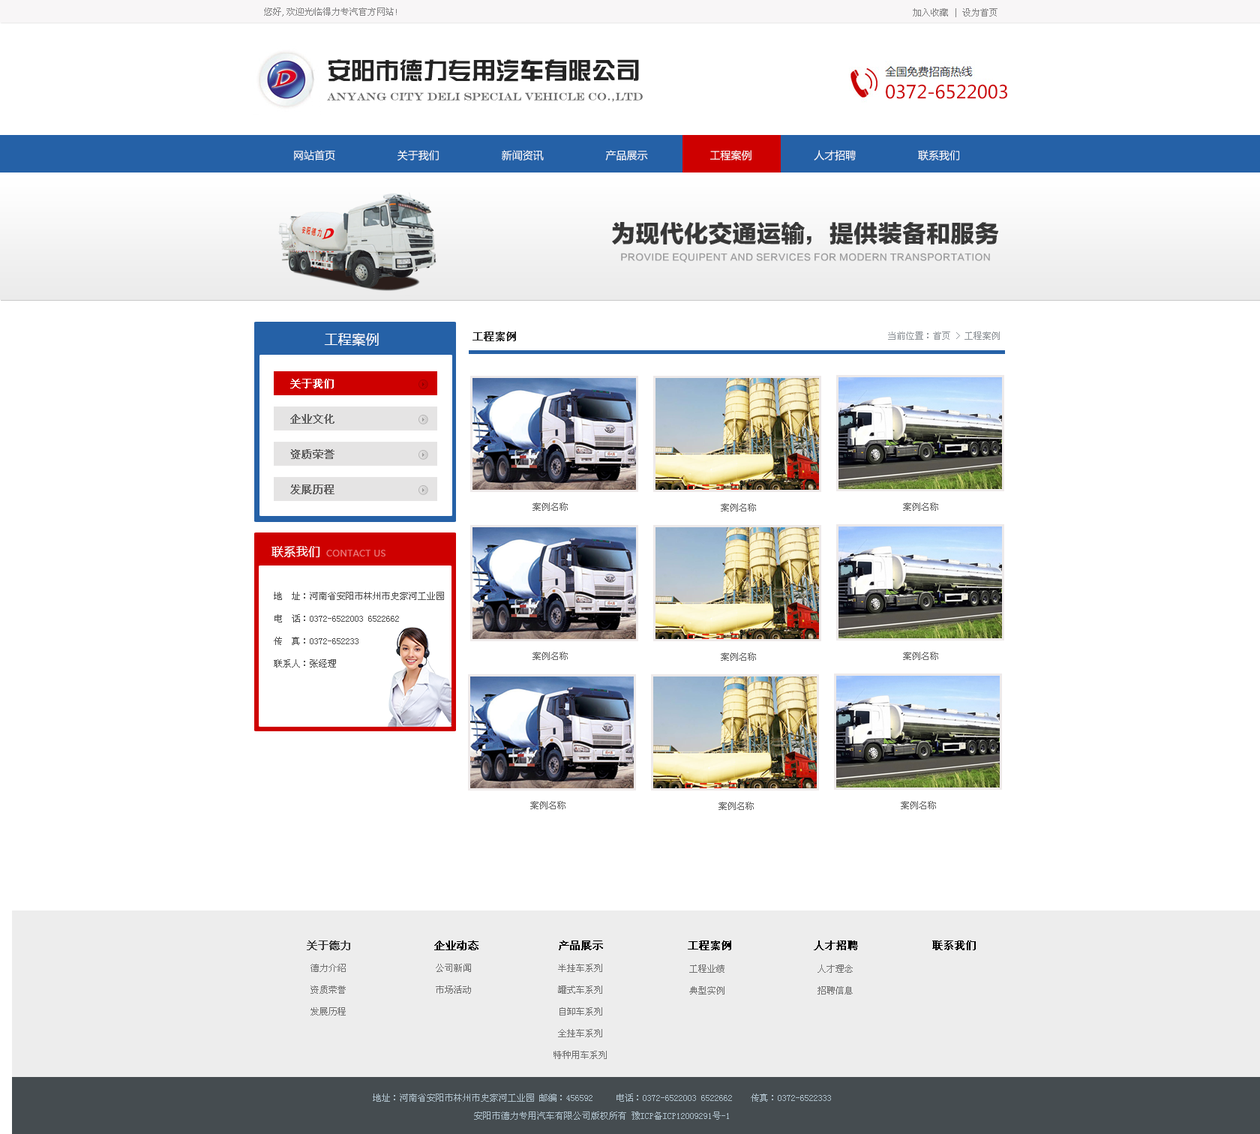
<style>
.page{position:relative;width:1260px;height:1134px;background:#ffffff}
.page>*{position:absolute;margin:0}
.t1{font:9px "SimSun";color:#848384}
.t2{font:24px "FZZYJW--GB1-0";color:#242424}
.t3{font:18px "MicrosoftYaHei";color:#cc0407}
.t4{font:10.5px "EngraversMT";color:#6d6d6d}
.t5{font:10.5px "MicrosoftYaHei";color:#ffffff}
.t6{font:24px "FZLTTHJW--GB1-0";color:#383838}
.t7{font:9px "FZLTZHK--GBK1-0";letter-spacing:0.02em;color:#9e9e9f}
.t8{font:13.5px "MicrosoftYaHei";letter-spacing:0.02em;color:#ffffff}
.t9{font:10.5px "SimSun";color:#2a2a2a;font-weight:bold}
.t10{font:9px "SimSun";color:#90959a}
.t11{font:10.5px "SimSun";letter-spacing:0.02em;color:#ffffff;font-weight:bold}
.t12{font:10.5px "SimSun";letter-spacing:0.02em;color:#636262;font-weight:bold}
.t13{font:9px "SimSun";color:#676767}
.t14{font:12px "MicrosoftYaHei";letter-spacing:0.02em;color:#fefefe}
.t15{font:9px "MicrosoftYaHei";letter-spacing:0.02em;color:#e97575}
.t16{font:9px/22.5px "SimSun";color:#505050}
.t17{font:10.5px "SimSun";color:#3a3a3a;font-weight:bold}
.t18{font:10.5px "SimSun";color:#000000;font-weight:bold}
.t19{font:9px/21.8px "SimSun";color:#727272}
.t20{font:9px/18px "SimSun";color:#adbfca}
</style>
<div class="page">
<p class="t1" style="left:264px;top:8px;width:133px;height:8px">您好,欢迎光临得力专汽官方网站!</p>
<p class="t1" style="left:913px;top:8px;width:85px;height:9px">加入收藏 | 设为首页</p>
<p class="t2" style="left:328px;top:59px;width:311px;height:23px">安阳市德力专用汽车有限公司</p>
<p class="t3" style="left:886px;top:84px;width:121px;height:15px">0372-6522003</p>
<p class="t4" style="left:327px;top:92px;width:316px;height:10px">ANYANG CITY DELI SPECIAL VEHICLE CO.,LTD</p>
<p class="t5" style="left:294px;top:150px;width:665px;height:10px">网站首页                    关于我们                    新闻资讯                    产品展示                    工程案例                    人才招聘                    联系我们</p>
<p class="t6" style="left:612px;top:222px;width:387px;height:23px">为现代化交通运输，提供装备和服务</p>
<p class="t7" style="left:621px;top:253px;width:369px;height:9px">PROVIDE EQUIPENT AND SERVICES FOR MODERN TRANSPORTATION</p>
<p class="t8" style="left:324px;top:333px;width:55px;height:13px">工程案例</p>
<p class="t9" style="left:472px;top:332px;width:44px;height:9px">工程案例</p>
<p class="t10" style="left:888px;top:332px;width:112px;height:8px">当前位置：首页 &gt; 工程案例</p>
<p class="t11" style="left:290px;top:379px;width:44px;height:9px">关于我们</p>
<p class="t12" style="left:290px;top:414px;width:44px;height:10px">企业文化</p>
<p class="t12" style="left:290px;top:449px;width:44px;height:10px">资质荣誉</p>
<p class="t12" style="left:290px;top:484px;width:44px;height:10px">发展历程</p>
<p class="t13" style="left:532px;top:502px;width:36px;height:9px">案例名称</p>
<p class="t13" style="left:721px;top:503px;width:35px;height:9px">案例名称</p>
<p class="t13" style="left:903px;top:502px;width:35px;height:9px">案例名称</p>
<p class="t14" style="left:272px;top:546px;width:48px;height:12px">联系我们</p>
<p class="t15" style="left:326px;top:550px;width:60px;height:6px">CONTACT US</p>
<p class="t16" style="left:274px;top:592px;width:170px;height:76px">地  址：河南省安阳市林州市史家河工业园<br>电  话：0372-6522003 6522662<br>传  真：0372-652233<br>联系人：张经理</p>
<p class="t13" style="left:532px;top:652px;width:36px;height:8px">案例名称</p>
<p class="t13" style="left:721px;top:652px;width:35px;height:9px">案例名称</p>
<p class="t13" style="left:903px;top:652px;width:35px;height:8px">案例名称</p>
<p class="t13" style="left:530px;top:801px;width:36px;height:8px">案例名称</p>
<p class="t13" style="left:718px;top:802px;width:36px;height:8px">案例名称</p>
<p class="t13" style="left:901px;top:801px;width:35px;height:8px">案例名称</p>
<p class="t17" style="left:307px;top:940px;width:43px;height:10px">关于德力</p>
<p class="t18" style="left:434px;top:940px;width:44px;height:10px">企业动态</p>
<p class="t18" style="left:559px;top:940px;width:44px;height:10px">产品展示</p>
<p class="t18" style="left:688px;top:940px;width:43px;height:10px">工程案例</p>
<p class="t18" style="left:814px;top:940px;width:44px;height:10px">人才招聘</p>
<p class="t18" style="left:932px;top:940px;width:44px;height:10px">联系我们</p>
<p class="t19" style="left:310px;top:964px;width:36px;height:52px">德力介绍<br>资质荣誉<br>发展历程</p>
<p class="t19" style="left:436px;top:964px;width:35px;height:30px">公司新闻<br>市场活动</p>
<p class="t19" style="left:554px;top:964px;width:53px;height:95px;text-align:center">半挂车系列<br>罐式车系列<br>自卸车系列<br>全挂车系列<br>特种用车系列</p>
<p class="t19" style="left:689px;top:964px;width:35px;height:30px;text-align:center">工程业绩<br>典型实例</p>
<p class="t19" style="left:818px;top:964px;width:35px;height:30px;text-align:center">人才理念<br>招聘信息</p>
<p class="t20" style="left:373px;top:1094px;width:458px;height:26px;text-align:center">地址：河南省安阳市林州市史家河工业园 邮编：456592 　　电话：0372-6522003 6522662　　传真：0372-6522333<br>安阳市德力专用汽车有限公司版权所有 豫ICP备ICP12009291号-1</p>
</div>
